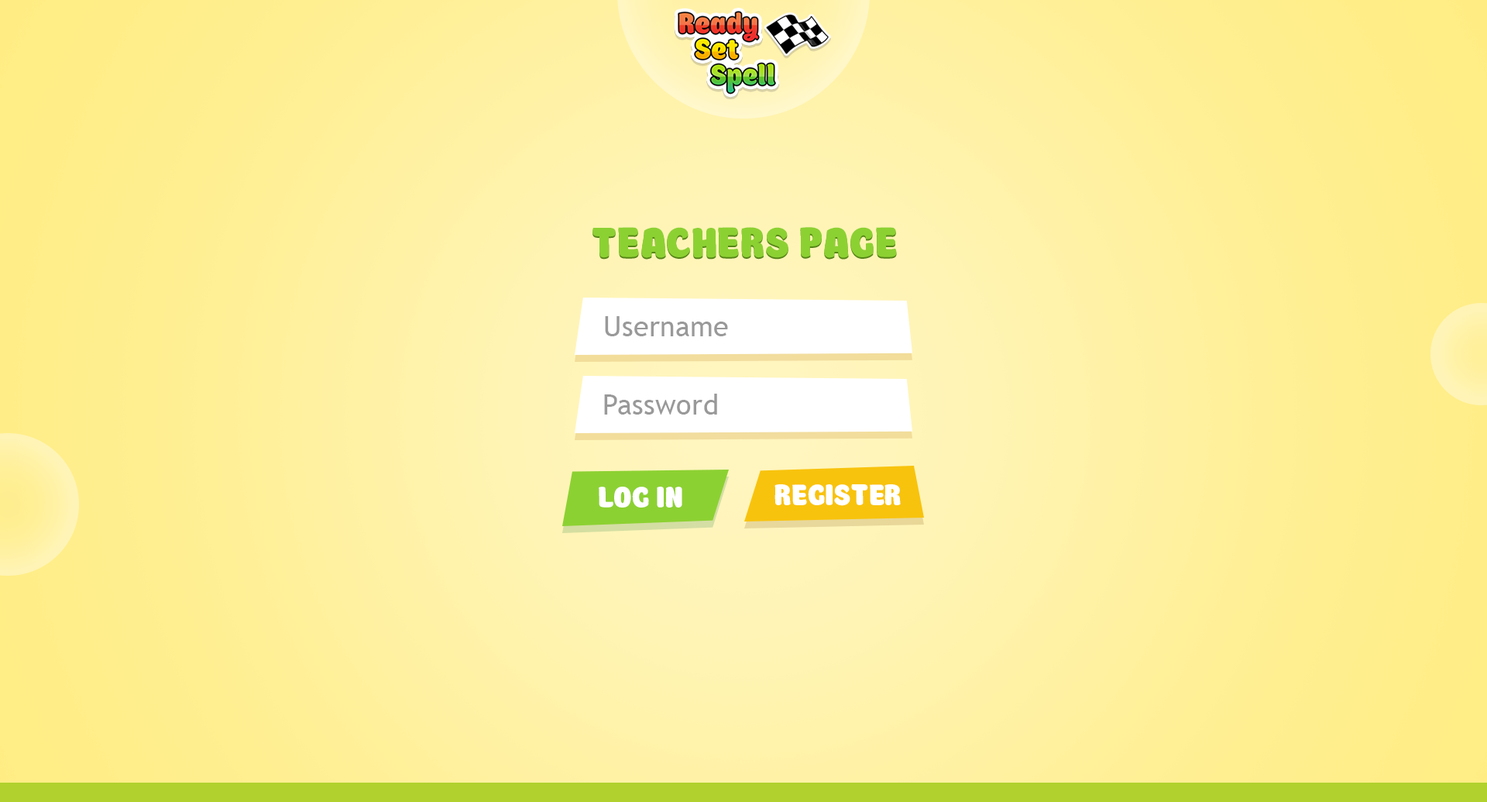
<style>
.page{position:relative;width:1487px;height:802px}
.page>*{position:absolute;margin:0}
.t1{font:46.5px "Boomboom";letter-spacing:0.01em;color:#8cd132}
.t2{font:27.9px "TrebuchetMS";letter-spacing:0.01em;color:#999999}
.t3{font:32.5px "Boomboom";letter-spacing:0.01em;color:#ffffff}
</style>
<div class="page">
<p class="t1" style="left:593px;top:227px;width:304px;height:31px">TEACHERS PAGE</p>
<p class="t2" style="left:605px;top:316px;width:123px;height:20px">Username</p>
<p class="t2" style="left:604px;top:394px;width:113px;height:20px">Password</p>
<p class="t3" style="left:775px;top:484px;width:126px;height:22px">REGISTER</p>
<p class="t3" style="left:599px;top:486px;width:83px;height:21px">LOG IN</p>
</div>
